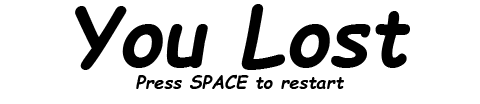
<style>
.page{position:relative;width:480px;height:104px;background:#ffffff}
.page>*{position:absolute;margin:0}
.t1{font:82px "ComicSansMS-BoldItalic";color:#000000}
.t2{font:18px "ComicSansMS-BoldItalic";color:#000000}
</style>
<div class="page">
<p class="t1" style="left:75px;top:4px;width:335px;height:66px">You Lost</p>
<p class="t2" style="left:136px;top:74px;width:208px;height:15px">Press SPACE to restart</p>
</div>
